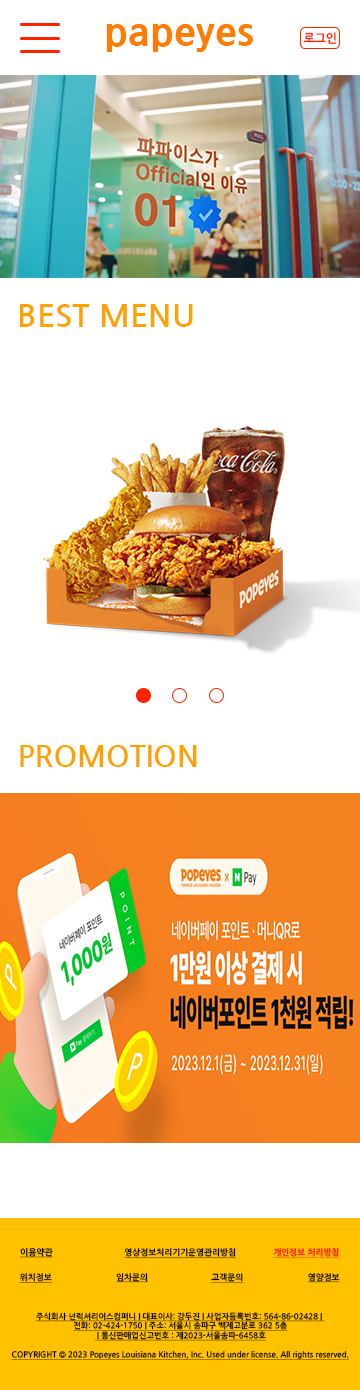
<style>
.page{position:relative;width:360px;height:1390px;background:#ffffff}
.page>*{position:absolute;margin:0}
.t1{font:40px "NanumGothicExtraBold";color:#ff7c00}
.t2{font:12px "NanumGothicBold";color:#ff2200}
.t3{font:32px "NanumGothicBold";color:#ffa200}
.t4{font:30px "NanumGothicBold";color:#ffa200}
.t5{font:8.7px "NanumGothicBold";color:#000000;text-decoration:underline}
.t6{font:8.5px "NanumGothicBold";color:#000000;text-decoration:underline}
.t7{font:8.5px "NanumGothicExtraBold";color:#ff2200;text-decoration:underline}
.t8{font:8px "NanumGothicBold";color:#000000;text-decoration:underline}
</style>
<div class="page">
<p class="t1" style="left:106px;top:24px;width:147px;height:28px">papeyes</p>
<p class="t2" style="left:303px;top:32px;width:34px;height:12px">로그인</p>
<p class="t3" style="left:19px;top:304px;width:174px;height:23px">BEST MENU</p>
<p class="t4" style="left:20px;top:745px;width:177px;height:22px">PROMOTION</p>
<p class="t5" style="left:20px;top:1247px;width:33px;height:11px">이용약관</p>
<p class="t6" style="left:124px;top:1248px;width:112px;height:11px">영상정보처리기기운영관리방침</p>
<p class="t7" style="left:273px;top:1248px;width:67px;height:11px">개인정보 처리방침</p>
<p class="t6" style="left:19px;top:1273px;width:33px;height:10px">위치정보</p>
<p class="t6" style="left:116px;top:1273px;width:32px;height:10px">임차문의</p>
<p class="t6" style="left:211px;top:1273px;width:33px;height:10px">고객문의</p>
<p class="t6" style="left:307px;top:1273px;width:33px;height:10px">영양정보</p>
<p class="t8" style="left:11px;top:1312px;width:338px;height:48px;text-align:center">주식회사 넌럭셔리어스컴퍼니 | 대표이사: 강두진 | 사업자등록번호: 564-86-02428 | <br>전화: 02-424-1750 | 주소: 서울시 송파구 백제고분로 362 5층<br> | 통신판매업신고번호 : 제2023-서울송파-6458호<br><br>COPYRIGHT © 2023 Popeyes Louisiana Kitchen, Inc. Used under license. All rights reserved.</p>
</div>
